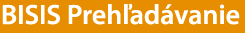
<style>
.page{position:relative;width:245px;height:33px;background:#e68d00}
.page>*{position:absolute;margin:0}
.t1{font:28px "MyriadPro-Semibold";color:#ffffff}
</style>
<div class="page">
<p class="t1" style="left:2px;top:3px;width:238px;height:22px">BISIS Prehľadávanie</p>
</div>
